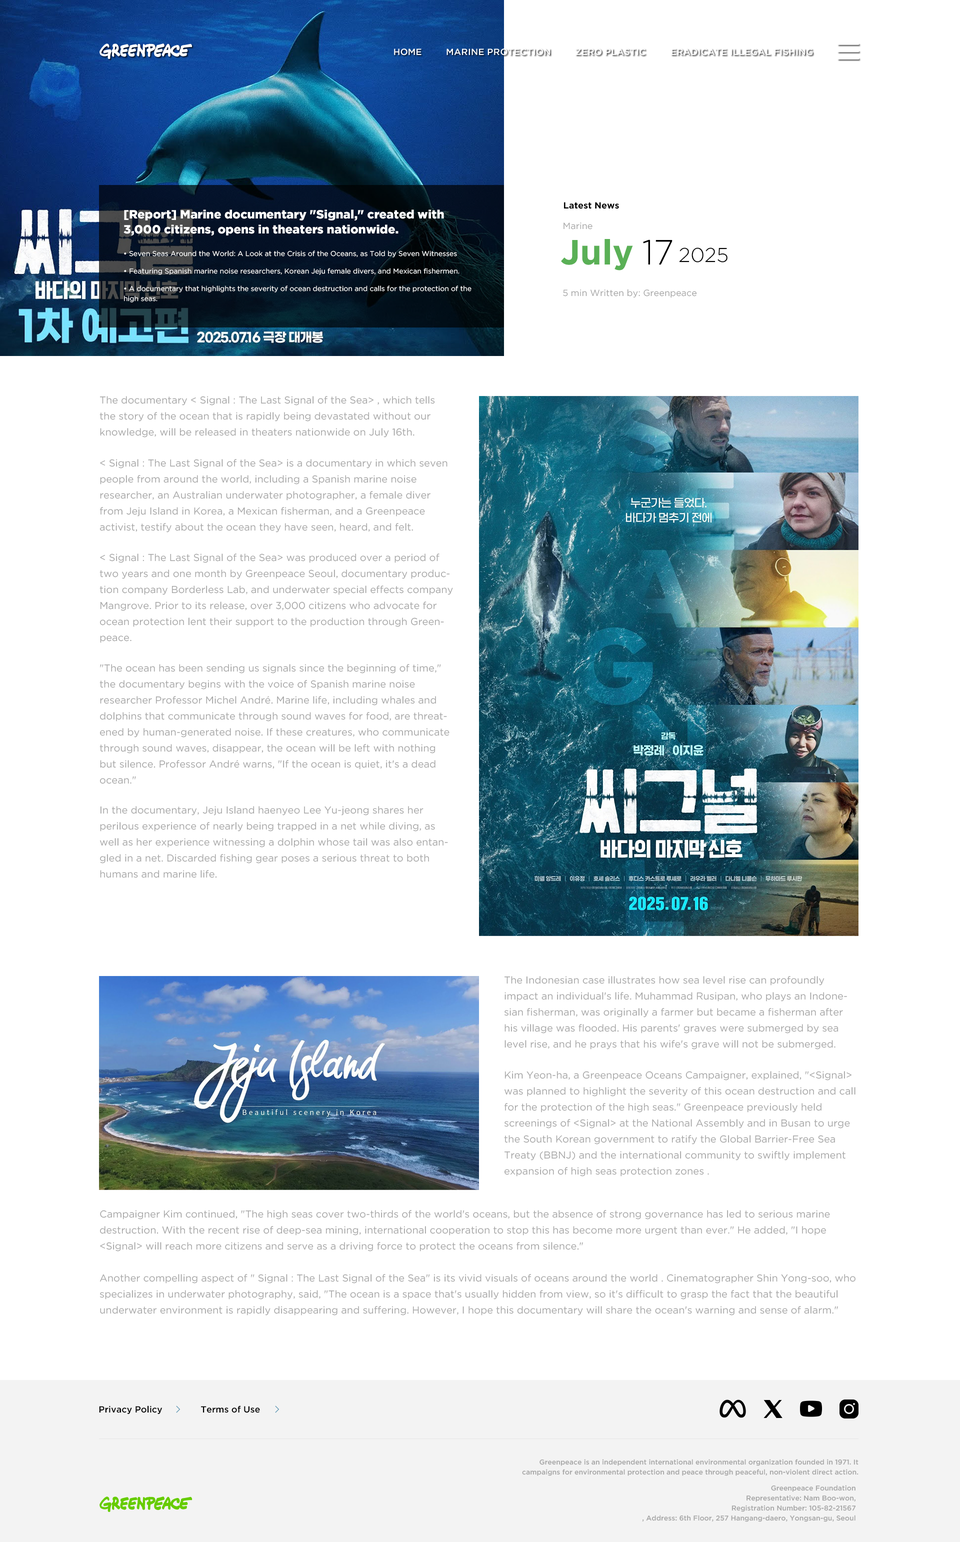
<style>
.page{position:relative;width:960px;height:1542px;background:#ffffff}
.page>*{position:absolute;margin:0}
.t1{font:9px "GothamPro-Medium";color:#ffffff}
.t2{font:9px "GothamPro-Medium";color:#ffffff;text-transform:uppercase}
.t3{font:12px/15px "GothamPro-Black";color:#ffffff}
.t4{font:9px "GothamPro-Bold";color:#000000}
.t5{font:9px "GothamPro";color:#a6a6a6}
.t6{font:35px "GothamPro-Bold";color:#5ab056}
.t7{font:35px "GothamPro-Light";color:#000000}
.t8{font:7px "GothamPro";color:#ffffff}
.t9{font:20px "GothamPro-Light";color:#000000}
.t10{font:7px/10px "GothamPro";color:#ffffff}
.t11{font:10px/16px "GothamPro";color:#a6a6a6}
.t12{font:9px "GothamPro-Medium";color:#000000}
.t13{font:7px/10px "GothamPro-Medium";color:#a6a6a6}
</style>
<div class="page">
<p class="t1" style="left:394px;top:48px;width:28px;height:8px">HOME</p>
<p class="t2" style="left:446px;top:48px;width:104px;height:8px">Marine protection</p>
<p class="t2" style="left:576px;top:48px;width:70px;height:8px">Zero plastic</p>
<p class="t2" style="left:671px;top:48px;width:141px;height:8px">Eradicate illegal fishing</p>
<p class="t3" style="left:124px;top:210px;width:320px;height:26px">[Report] Marine documentary "Signal," created with 3,000 citizens, opens in theaters nationwide.</p>
<p class="t4" style="left:564px;top:202px;width:55px;height:7px">Latest News</p>
<p class="t5" style="left:564px;top:222px;width:28px;height:8px">Marine</p>
<p class="t6" style="left:561px;top:239px;width:72px;height:31px">July</p>
<p class="t7" style="left:643px;top:240px;width:29px;height:24px">17</p>
<p class="t8" style="left:124px;top:250px;width:333px;height:8px">• Seven Seas Around the World: A Look at the Crisis of the Oceans, as Told by Seven Witnesses</p>
<p class="t9" style="left:679px;top:248px;width:49px;height:14px">2025</p>
<p class="t8" style="left:124px;top:268px;width:336px;height:7px">• Featuring Spanish marine noise researchers, Korean Jeju female divers, and Mexican fishermen.</p>
<p class="t10" style="left:124px;top:286px;width:348px;height:16px">• A documentary that highlights the severity of ocean destruction and calls for the protection of the high seas.</p>
<p class="t5" style="left:563px;top:289px;width:134px;height:9px">5 min Written by: Greenpeace</p>
<p class="t11" style="left:100px;top:396px;width:335px;height:42px">The documentary &lt; Signal : The Last Signal of the Sea&gt; , which tells the story of the ocean that is rapidly being devastated without our knowledge, will be released in theaters nationwide on July 16th.</p>
<p class="t11" style="left:100px;top:459px;width:348px;height:73px">&lt; Signal : The Last Signal of the Sea&gt; is a documentary in which seven people from around the world, including a Spanish marine noise researcher, an Australian underwater photographer, a female diver from Jeju Island in Korea, a Mexican fisherman, and a Greenpeace activist, testify about the ocean they have seen, heard, and felt.</p>
<p class="t11" style="left:100px;top:554px;width:353px;height:89px">&lt; Signal : The Last Signal of the Sea&gt; was produced over a period of two years and one month by Greenpeace Seoul, documentary production company Borderless Lab, and underwater special effects company Mangrove. Prior to its release, over 3,000 citizens who advocate for ocean protection lent their support to the production through Greenpeace.</p>
<p class="t11" style="left:100px;top:664px;width:350px;height:120px">"The ocean has been sending us signals since the beginning of time," the documentary begins with the voice of Spanish marine noise researcher Professor Michel André. Marine life, including whales and dolphins that communicate through sound waves for food, are threatened by human-generated noise. If these creatures, who communicate through sound waves, disappear, the ocean will be left with nothing but silence. Professor André warns, "If the ocean is quiet, it's a dead ocean."</p>
<p class="t11" style="left:100px;top:806px;width:348px;height:72px">In the documentary, Jeju Island haenyeo Lee Yu-jeong shares her perilous experience of nearly being trapped in a net while diving, as well as her experience witnessing a dolphin whose tail was also entangled in a net. Discarded fishing gear poses a serious threat to both humans and marine life.</p>
<p class="t11" style="left:504px;top:976px;width:343px;height:74px">The Indonesian case illustrates how sea level rise can profoundly impact an individual's life. Muhammad Rusipan, who plays an Indonesian fisherman, was originally a farmer but became a fisherman after his village was flooded. His parents' graves were submerged by sea level rise, and he prays that his wife's grave will not be submerged.</p>
<p class="t11" style="left:504px;top:1071px;width:352px;height:105px">Kim Yeon-ha, a Greenpeace Oceans Campaigner, explained, "&lt;Signal&gt; was planned to highlight the severity of this ocean destruction and call for the protection of the high seas." Greenpeace previously held screenings of &lt;Signal&gt; at the National Assembly and in Busan to urge the South Korean government to ratify the Global Barrier-Free Sea Treaty (BBNJ) and the international community to swiftly implement expansion of high seas protection zones .</p>
<p class="t11" style="left:100px;top:1210px;width:730px;height:42px">Campaigner Kim continued, "The high seas cover two-thirds of the world's oceans, but the absence of strong governance has led to serious marine destruction. With the recent rise of deep-sea mining, international cooperation to stop this has become more urgent than ever." He added, "I hope &lt;Signal&gt; will reach more citizens and serve as a driving force to protect the oceans from silence."</p>
<p class="t11" style="left:100px;top:1274px;width:756px;height:42px">Another compelling aspect of " Signal : The Last Signal of the Sea" is its vivid visuals of oceans around the world . Cinematographer Shin Yong-soo, who specializes in underwater photography, said, "The ocean is a space that's usually hidden from view, so it's difficult to grasp the fact that the beautiful underwater environment is rapidly disappearing and suffering. However, I hope this documentary will share the ocean's warning and sense of alarm."</p>
<p class="t12" style="left:99px;top:1406px;width:63px;height:8px">Privacy Policy</p>
<p class="t12" style="left:201px;top:1406px;width:59px;height:7px">Terms of Use</p>
<p class="t13" style="left:522px;top:1459px;width:336px;height:17px;text-align:right">Greenpeace is an independent international environmental organization founded in 1971. It campaigns for environmental protection and peace through peaceful, non-violent direct action.</p>
<p class="t13" style="left:642px;top:1485px;width:214px;height:37px;text-align:right">Greenpeace Foundation<br>Representative: Nam Boo-won,<br>Registration Number: 105-82-21567<br>, Address: 6th Floor, 257 Hangang-daero, Yongsan-gu, Seoul</p>
</div>
